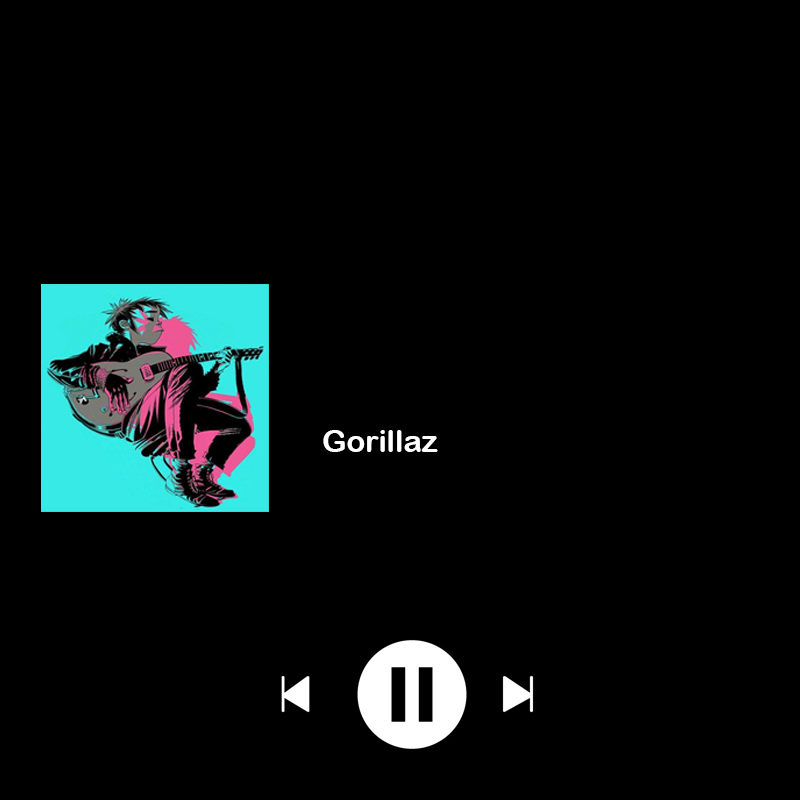
<style>
.page{position:relative;width:800px;height:800px;background:#000000}
.page>*{position:absolute;margin:0}
.t1{font:30.8px "ArialRoundedMTBold";color:#ffffff}
</style>
<div class="page">
<p class="t1" style="left:323px;top:430px;width:115px;height:22px">Gorillaz</p>
</div>
